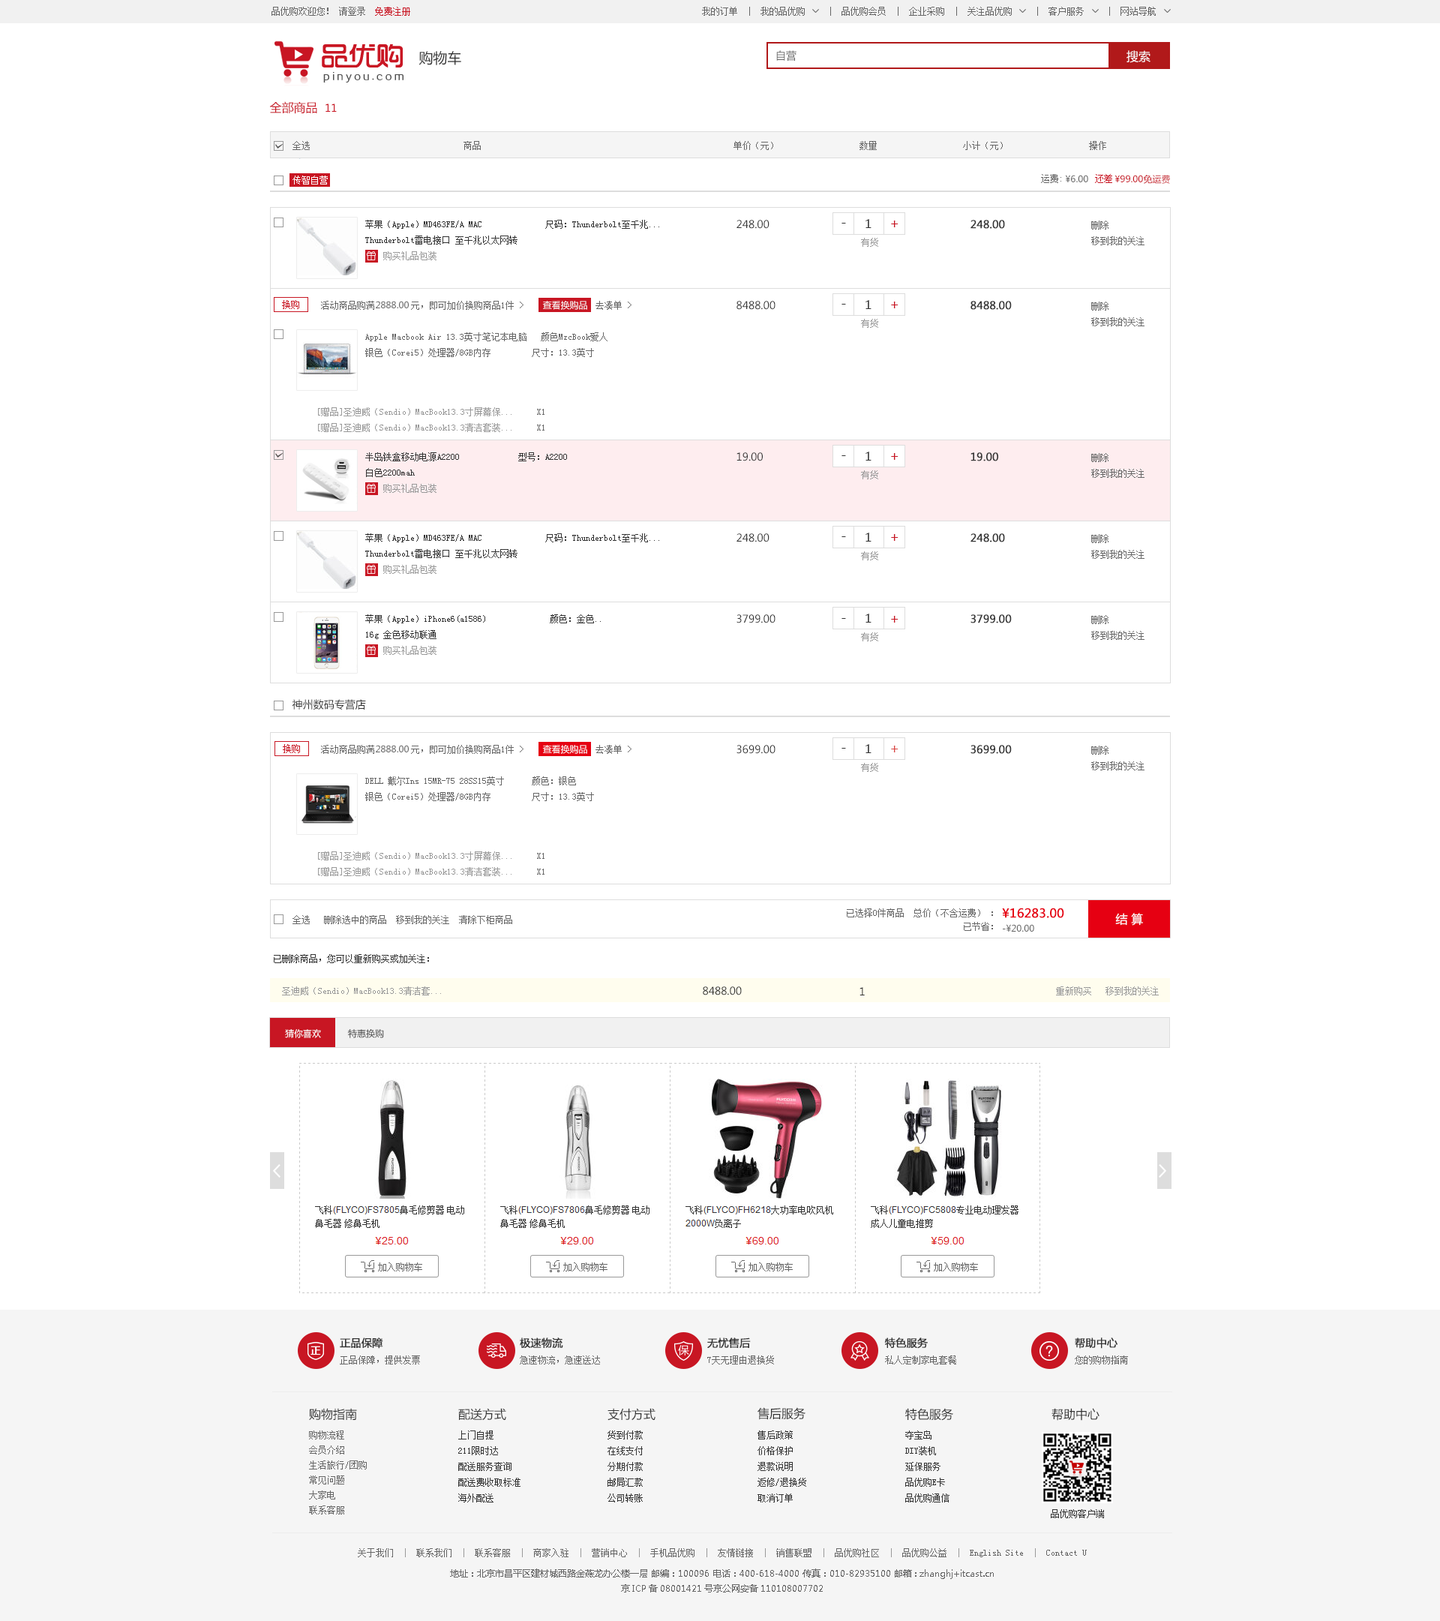
<style>
.page{position:relative;width:1440px;height:1621px;background:#ffffff}
.page>*{position:absolute;margin:0}
.t1{font:9px "SimSun";color:#666666}
.t2{font:9px "SimSun";color:#c81623}
.t3{font:14.2px "MicrosoftYaHei";color:#333333}
.t4{font:10.5px "MicrosoftYaHei";color:#666666}
.t5{font:12px "MicrosoftYaHei";color:#ffffff}
.t6{font:12px "MicrosoftYaHei";color:#c81623}
.t7{font:10.5px "MicrosoftYaHei";color:#c81623}
.t8{font:9px "SimSun";color:#ffffff}
.t9{font:9px "MicrosoftYaHei";color:#666666}
.t10{font:9px "MicrosoftYaHei";color:#c81623}
.t11{font:9px/15.8px "SimSun";color:#333333}
.t12{font:9px/15.8px "SimSun";color:#999999}
.t13{font:10.5px "MicrosoftYaHei";color:#333333}
.t14{font:12px "MicrosoftYaHei";letter-spacing:0.01em;color:#333333}
.t15{font:13.5px "MicrosoftYaHei";letter-spacing:0.01em;color:#c81623}
.t16{font:10.5px "MicrosoftYaHei";color:#333333;font-weight:bold}
.t17{font:9px/15.8px "SimSun";color:#666666}
.t18{font:13.5px "MicrosoftYaHei";letter-spacing:0.01em;color:#333333}
.t19{font:9px "SimSun";color:#999999}
.t20{font:9px "MicrosoftYaHei";color:#ffffff}
.t21{font:13.5px "MicrosoftYaHei";letter-spacing:0.01em;color:#da4946}
.t22{font:9px/13.5px "SimSun";color:#666666}
.t23{font:12px "MicrosoftYaHei";color:#e60012;font-weight:bold}
.t24{font:12px "MicrosoftYaHei";color:#fefefe}
.t25{font:9px "SimSun";color:#333333}
.t26{font:9px "MicrosoftYaHei";color:#333333}
.t27{font:12px "MicrosoftYaHei";color:#333333}
.t28{font:9px/15px "SimSun";color:#666666}
.t29{font:9px/15.7px "SimSun";color:#333333}
.t30{font:9px/15px "MicrosoftYaHei";color:#666666}
.t31{font:9px/21px "SimSun";color:#666666}
.t32{font:9px/21px "SimSun";color:#999999}
.t33{font:9px/9.7px "MicrosoftYaHei";color:#666666}
</style>
<div class="page">
<p class="t1" style="left:272px;top:7px;width:138px;height:9px">品优购欢迎您！ 请登录  <span class="t2">免费注册</span></p>
<p class="t1" style="left:702px;top:7px;width:454px;height:9px">我的订单  |  我的品优购     |  品优购会员  |  企业采购  |  关注品优购     |  客户服务     |  网站导航</p>
<p class="t3" style="left:418px;top:51px;width:43px;height:14px">购物车</p>
<p class="t4" style="left:776px;top:50px;width:20px;height:11px">自营</p>
<p class="t5" style="left:1126px;top:50px;width:24px;height:13px">搜索</p>
<p class="t6" style="left:269px;top:101px;width:68px;height:13px">全部商品  <span class="t7">11</span></p>
<p class="t1" style="left:292px;top:141px;width:814px;height:9px">全选                                  商品                                                        单价（元）                  数量                   小计（元）                  操作</p>
<p class="t1" style="left:1041px;top:174px;width:71px;height:9px">运费:       <span class="t2">还差</span></p>
<p class="t8" style="left:292px;top:176px;width:36px;height:8px">传智自营</p>
<p class="t9" style="left:1065px;top:175px;width:23px;height:7px">¥6.00</p>
<p class="t10" style="left:1114px;top:175px;width:56px;height:9px">¥99.00免运费</p>
<p class="t11" style="left:365px;top:220px;width:294px;height:40px">苹果（Apple）MD463FE/A MAC              尺码：Thunderbolt至千兆...<br>Thunderbolt雷电接口 至千兆以太网转<br>    <span class="t12">购买礼品包装</span></p>
<p class="t13" style="left:736px;top:220px;width:34px;height:9px">248.00</p>
<p class="t14" style="left:866px;top:219px;width:6px;height:9px">1</p>
<p class="t15" style="left:891px;top:220px;width:7px;height:7px">+</p>
<p class="t16" style="left:970px;top:220px;width:35px;height:9px">248.00</p>
<p class="t17" style="left:1091px;top:220px;width:53px;height:25px">删除<br>移到我的关注</p>
<p class="t18" style="left:842px;top:223px;width:4px;height:1px">-</p>
<p class="t19" style="left:861px;top:238px;width:17px;height:9px">有货</p>
<p class="t2" style="left:282px;top:300px;width:17px;height:9px">换购</p>
<p class="t1" style="left:321px;top:301px;width:311px;height:9px">活动商品购满        元，即可加价换购商品1件 &gt;                去凑单 &gt;</p>
<p class="t9" style="left:376px;top:301px;width:33px;height:7px">2888.00</p>
<p class="t20" style="left:542px;top:301px;width:45px;height:9px">查看换购品</p>
<p class="t13" style="left:736px;top:301px;width:40px;height:9px">8488.00</p>
<p class="t18" style="left:842px;top:304px;width:4px;height:0px">-</p>
<p class="t14" style="left:866px;top:300px;width:6px;height:9px">1</p>
<p class="t15" style="left:891px;top:302px;width:7px;height:6px">+</p>
<p class="t16" style="left:970px;top:301px;width:42px;height:9px">8488.00</p>
<p class="t17" style="left:1091px;top:302px;width:53px;height:24px">删除<br>移到我的关注</p>
<p class="t19" style="left:861px;top:319px;width:17px;height:9px">有货</p>
<p class="t17" style="left:365px;top:332px;width:243px;height:25px">Apple Macbook Air 13.3英寸笔记本电脑   颜色MzcBook爱人<br>银色（Corei5）处理器/8GB内存         尺寸：13.3英寸</p>
<p class="t19" style="left:318px;top:407px;width:226px;height:9px">[赠品]圣迪威（Sendio）MacBook13.3寸屏幕保...     <span class="t1">X1</span></p>
<p class="t19" style="left:318px;top:423px;width:226px;height:9px">[赠品]圣迪威（Sendio）MacBook13.3清洁套装...     <span class="t1">X1</span></p>
<p class="t11" style="left:365px;top:452px;width:202px;height:41px">半岛铁盒移动电源A2200             型号：A2200<br>白色2200mah<br>    <span class="t12">购买礼品包装</span></p>
<p class="t13" style="left:736px;top:452px;width:27px;height:9px">19.00</p>
<p class="t18" style="left:842px;top:455px;width:4px;height:1px">-</p>
<p class="t14" style="left:866px;top:452px;width:6px;height:8px">1</p>
<p class="t15" style="left:891px;top:453px;width:7px;height:7px">+</p>
<p class="t16" style="left:970px;top:452px;width:28px;height:9px">19.00</p>
<p class="t17" style="left:1091px;top:453px;width:53px;height:25px">删除<br>移到我的关注</p>
<p class="t19" style="left:861px;top:470px;width:17px;height:9px">有货</p>
<p class="t11" style="left:365px;top:533px;width:294px;height:41px">苹果（Apple）MD463FE/A MAC              尺码：Thunderbolt至千兆...<br>Thunderbolt雷电接口 至千兆以太网转<br>    <span class="t12">购买礼品包装</span></p>
<p class="t13" style="left:736px;top:533px;width:34px;height:9px">248.00</p>
<p class="t14" style="left:866px;top:532px;width:6px;height:10px">1</p>
<p class="t15" style="left:891px;top:534px;width:7px;height:7px">+</p>
<p class="t16" style="left:970px;top:533px;width:35px;height:9px">248.00</p>
<p class="t17" style="left:1091px;top:534px;width:53px;height:25px">删除<br>移到我的关注</p>
<p class="t18" style="left:842px;top:536px;width:4px;height:1px">-</p>
<p class="t19" style="left:861px;top:551px;width:17px;height:9px">有货</p>
<p class="t11" style="left:365px;top:614px;width:236px;height:41px">苹果（Apple）iPhone6(a1586)              颜色：金色..<br>16g 金色移动联通<br>    <span class="t12">购买礼品包装</span></p>
<p class="t13" style="left:736px;top:614px;width:40px;height:9px">3799.00</p>
<p class="t14" style="left:866px;top:614px;width:6px;height:8px">1</p>
<p class="t15" style="left:891px;top:616px;width:7px;height:6px">+</p>
<p class="t16" style="left:970px;top:614px;width:42px;height:9px">3799.00</p>
<p class="t17" style="left:1091px;top:615px;width:53px;height:25px">删除<br>移到我的关注</p>
<p class="t18" style="left:842px;top:618px;width:4px;height:1px">-</p>
<p class="t19" style="left:861px;top:632px;width:17px;height:9px">有货</p>
<p class="t13" style="left:292px;top:699px;width:74px;height:11px">神州数码专营店</p>
<p class="t2" style="left:283px;top:744px;width:17px;height:9px">换购</p>
<p class="t1" style="left:321px;top:745px;width:311px;height:9px">活动商品购满        元，即可加价换购商品1件 &gt;                去凑单 &gt;</p>
<p class="t9" style="left:376px;top:745px;width:33px;height:7px">2888.00</p>
<p class="t20" style="left:542px;top:745px;width:45px;height:9px">查看换购品</p>
<p class="t13" style="left:736px;top:745px;width:40px;height:9px">3699.00</p>
<p class="t18" style="left:842px;top:748px;width:4px;height:0px">-</p>
<p class="t14" style="left:866px;top:744px;width:6px;height:9px">1</p>
<p class="t21" style="left:891px;top:746px;width:7px;height:6px">+</p>
<p class="t16" style="left:970px;top:745px;width:42px;height:9px">3699.00</p>
<p class="t17" style="left:1091px;top:746px;width:53px;height:24px">删除<br>移到我的关注</p>
<p class="t19" style="left:861px;top:763px;width:17px;height:9px">有货</p>
<p class="t17" style="left:365px;top:776px;width:229px;height:25px">DELL 戴尔Ins 15MR-75 28SS15英寸      颜色：银色<br>银色（Corei5）处理器/8GB内存         尺寸：13.3英寸</p>
<p class="t19" style="left:318px;top:851px;width:226px;height:9px">[赠品]圣迪威（Sendio）MacBook13.3寸屏幕保...     <span class="t1">X1</span></p>
<p class="t19" style="left:318px;top:867px;width:226px;height:9px">[赠品]圣迪威（Sendio）MacBook13.3清洁套装...     <span class="t1">X1</span></p>
<p class="t1" style="left:292px;top:915px;width:220px;height:9px">全选   删除选中的商品  移到我的关注  清除下柜商品</p>
<p class="t22" style="left:847px;top:908px;width:146px;height:23px">已选择0件商品  总价（不含运费） ：   <br>                           已节省：</p>
<p class="t23" style="left:1002px;top:908px;width:62px;height:10px">¥16283.00</p>
<p class="t24" style="left:1115px;top:913px;width:28px;height:13px">结 算</p>
<p class="t9" style="left:1003px;top:924px;width:31px;height:8px">-¥20.00</p>
<p class="t25" style="left:274px;top:954px;width:155px;height:9px">已删除商品，您可以重新购买或加关注：</p>
<p class="t19" style="left:282px;top:986px;width:877px;height:9px">圣迪威（Sendio）MacBook13.3清洁套...                                                                                                                                        重新购买   移到我的关注</p>
<p class="t13" style="left:703px;top:986px;width:39px;height:9px">8488.00</p>
<p class="t13" style="left:860px;top:987px;width:5px;height:8px">1</p>
<p class="t20" style="left:285px;top:1029px;width:36px;height:9px">猜你喜欢</p>
<p class="t26" style="left:348px;top:1029px;width:36px;height:9px">特惠换购</p>
<p class="t16" style="left:340px;top:1337px;width:43px;height:11px">正品保障</p>
<p class="t16" style="left:520px;top:1337px;width:43px;height:11px">极速物流</p>
<p class="t16" style="left:707px;top:1337px;width:44px;height:11px">无忧售后</p>
<p class="t16" style="left:884px;top:1337px;width:44px;height:11px">特色服务</p>
<p class="t16" style="left:1075px;top:1337px;width:43px;height:11px">帮助中心</p>
<p class="t1" style="left:340px;top:1355px;width:80px;height:9px">正品保障，提供发票</p>
<p class="t1" style="left:520px;top:1355px;width:80px;height:9px">急速物流，急速送达</p>
<p class="t1" style="left:707px;top:1355px;width:67px;height:9px">7天无理由退换货</p>
<p class="t1" style="left:885px;top:1355px;width:71px;height:9px">私人定制家电套餐</p>
<p class="t1" style="left:1075px;top:1355px;width:53px;height:9px">您的购物指南</p>
<p class="t27" style="left:309px;top:1408px;width:48px;height:12px">购物指南</p>
<p class="t27" style="left:458px;top:1408px;width:48px;height:12px">配送方式</p>
<p class="t27" style="left:608px;top:1408px;width:48px;height:12px">支付方式</p>
<p class="t27" style="left:758px;top:1407px;width:48px;height:13px">售后服务</p>
<p class="t27" style="left:905px;top:1408px;width:48px;height:12px">特色服务</p>
<p class="t27" style="left:1052px;top:1408px;width:48px;height:12px">帮助中心</p>
<p class="t28" style="left:309px;top:1430px;width:58px;height:84px">购物流程<br>会员介绍<br>生活旅行/团购<br>常见问题<br>大家电<br>联系客服</p>
<p class="t29" style="left:458px;top:1430px;width:62px;height:72px">上门自提<br>211限时达<br>配送服务查询<br>配送费收取标准<br>海外配送</p>
<p class="t29" style="left:608px;top:1430px;width:35px;height:72px">货到付款<br>在线支付<br>分期付款<br>邮局汇款<br>公司转账</p>
<p class="t29" style="left:758px;top:1430px;width:48px;height:72px">售后政策<br>价格保护<br>退款说明<br>返修/退换货<br>取消订单</p>
<p class="t29" style="left:905px;top:1430px;width:45px;height:72px">夺宝岛<br>DIY装机<br>延保服务<br>品优购E卡<br>品优购通信</p>
<p class="t25" style="left:1051px;top:1509px;width:53px;height:9px">品优购客户端</p>
<p class="t30" style="left:358px;top:1548px;width:729px;height:44px;text-align:center"><span class="t31">关于我们  </span><span class="t32">|</span><span class="t31">  联系我们  </span><span class="t32">|</span><span class="t31">  联系客服  </span><span class="t32">|</span><span class="t31">  商家入驻  </span><span class="t32">|</span><span class="t31">  营销中心  </span><span class="t32">|</span><span class="t31">  手机品优购  </span><span class="t32">|</span><span class="t31">  友情链接  </span><span class="t32">|</span><span class="t31">  销售联盟  </span><span class="t32">|</span><span class="t31">  品优购社区  </span><span class="t32">|</span><span class="t31">  品优购公益  </span><span class="t32">|</span><span class="t31">  English Site  </span><span class="t32">|</span><span class="t31">  Contact U<br></span>地址：北京市昌平区建材城西路金燕龙办公楼一层 邮编：100096 电话：400-618-4000 传真：010-82935100 邮箱: zhanghj+itcast.cn<br><span class="t33">京ICP备08001421号京公网安备110108007702</span></p>
</div>
